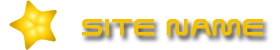
<style>
.page{position:relative;width:280px;height:50px;background:#ffffff}
.page>*{position:absolute;margin:0}
.t1{font:48.5px "SavedByZero";color:#f4c100;text-transform:uppercase;font-weight:bold}
</style>
<div class="page">
<p class="t1" style="left:82px;top:19px;width:181px;height:17px">Site Name</p>
</div>
